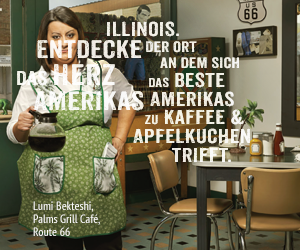
<style>
.page{position:relative;width:300px;height:250px}
.page>*{position:absolute;margin:0}
.t1{font:19.5px/18.8px "Anodyne";color:#f3f2e7;scale:1.25 1}
.t2{font:19.5px/14.3px "Anodyne";color:#f3f2e7;scale:1.25 1}
.t3{font:19.5px/17.1px "Anodyne";color:#f3f2e7;scale:1.25 1}
.t4{font:14.6px/15.9px "Anodyne";color:#f3f2e7;scale:1.25 1}
.t5{font:12.6px/18.8px "Anodyne";color:#f3f2e7;scale:1.25 1}
.t6{font:24.5px/24.1px "Anodyne";color:#f8f8f5;scale:1.24 1}
.t7{font:19.3px/25.2px "Anodyne";color:#f8f8f5;scale:1.24 1}
.t8{font:28.8px/25.2px "Anodyne";color:#f8f8f5;scale:1.24 1}
.t9{font:25.7px/25.2px "Anodyne";color:#f8f8f5;scale:1.24 1}
.t10{font:25.7px/24.8px "Anodyne";color:#f8f8f5;scale:1.24 1}
.t11{font:24.5px/24.1px "Anodyne";color:#ffffff;scale:1.24 1}
.t12{font:19.3px/25.2px "Anodyne";color:#ffffff;scale:1.24 1}
.t13{font:28.8px/25.2px "Anodyne";color:#ffffff;scale:1.24 1}
.t14{font:25.7px/25.2px "Anodyne";color:#ffffff;scale:1.24 1}
.t15{font:25.7px/24.8px "Anodyne";color:#ffffff;scale:1.24 1}
.t16{font:12px/13px "PTSans-Narrow";color:#fbfaf9}
.t17{font:12px/9px "PTSans-Narrow";color:#fbfaf9}
</style>
<div class="page">
<p class="t1" style="left:107px;top:21px;width:143px;height:141px;text-align:right"><span class="t2">         </span><span class="t3">illinois.<br></span><span class="t4">Der Ort     <br></span><span class="t4">           an dem sich<br>    </span><span class="t5">das</span> Beste<br>      Amerikas <br>       <span class="t5">zu</span> Kaffee &amp; <br>      Apfelkuchen <br>         trifft.</p>
<p class="t1" style="left:107px;top:21px;width:143px;height:141px;text-align:right"><span class="t2">         </span><span class="t3">illinois.<br></span><span class="t4">Der Ort     <br></span><span class="t4">           an dem sich<br>    </span><span class="t5">das</span> Beste<br>      Amerikas <br>       <span class="t5">zu</span> Kaffee &amp; <br>      Apfelkuchen <br>         trifft.</p>
<p class="t6" style="left:17px;top:40px;width:127px;height:71px;text-align:center">Entdecke<br><span class="t7">das </span><span class="t8">Herz  </span><span class="t9">     <br></span><span class="t10">Amerikas</span></p>
<p class="t11" style="left:17px;top:40px;width:127px;height:71px;text-align:center;opacity:0.71">Entdecke<br><span class="t12">das </span><span class="t13">Herz  </span><span class="t14">     <br></span><span class="t15">Amerikas</span></p>
<p class="t16" style="left:33px;top:201px;width:67px;height:35px"><span class="t17">Lumi Bekteshi, <br></span>Palms Grill Café,<br>Route 66</p>
</div>
